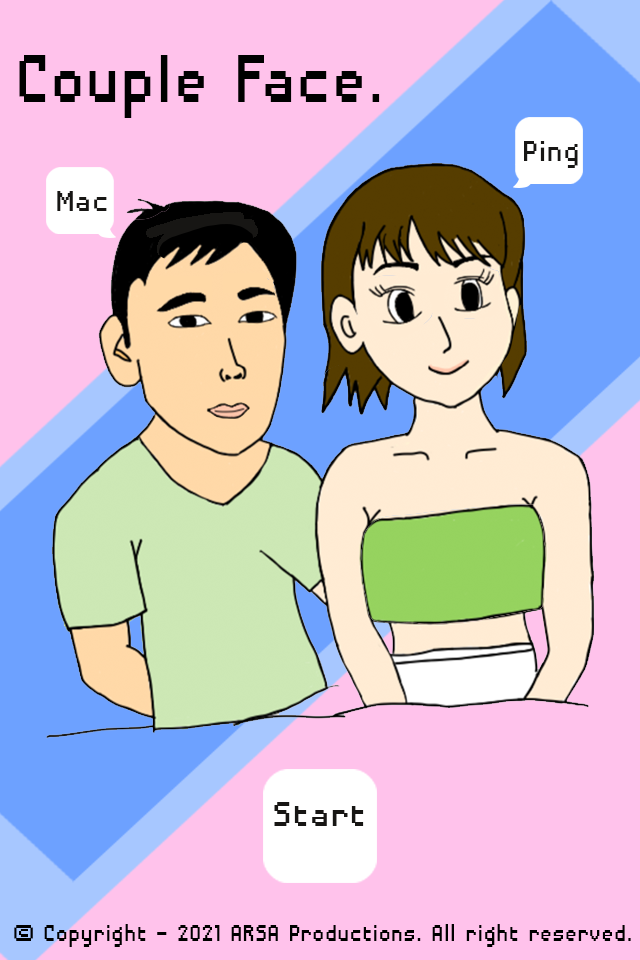
<style>
.page{position:relative;width:640px;height:960px;background:#ffc2eb}
.page>*{position:absolute;margin:0}
.t1{font:87.9px "DisposableDroidBB";color:#000000;scale:0.83 1}
.t2{font:37.7px "DisposableDroidBB";color:#171614;scale:0.92 1}
.t3{font:46.2px "DisposableDroidBB";color:#171614;scale:0.91 1}
.t4{font:31px "DisposableDroidBB";color:#000000;scale:0.83 1}
</style>
<div class="page">
<p class="t1" style="left:19px;top:55px;width:361px;height:63px">Couple Face.</p>
<p class="t2" style="left:524px;top:141px;width:54px;height:27px">Ping</p>
<p class="t2" style="left:57px;top:191px;width:50px;height:20px">Mac</p>
<p class="t3" style="left:274px;top:802px;width:90px;height:24px">Start</p>
<p class="t4" style="left:14px;top:924px;width:617px;height:23px">(c) Copyright - 2021 ARSA Productions. All right reserved.</p>
</div>
